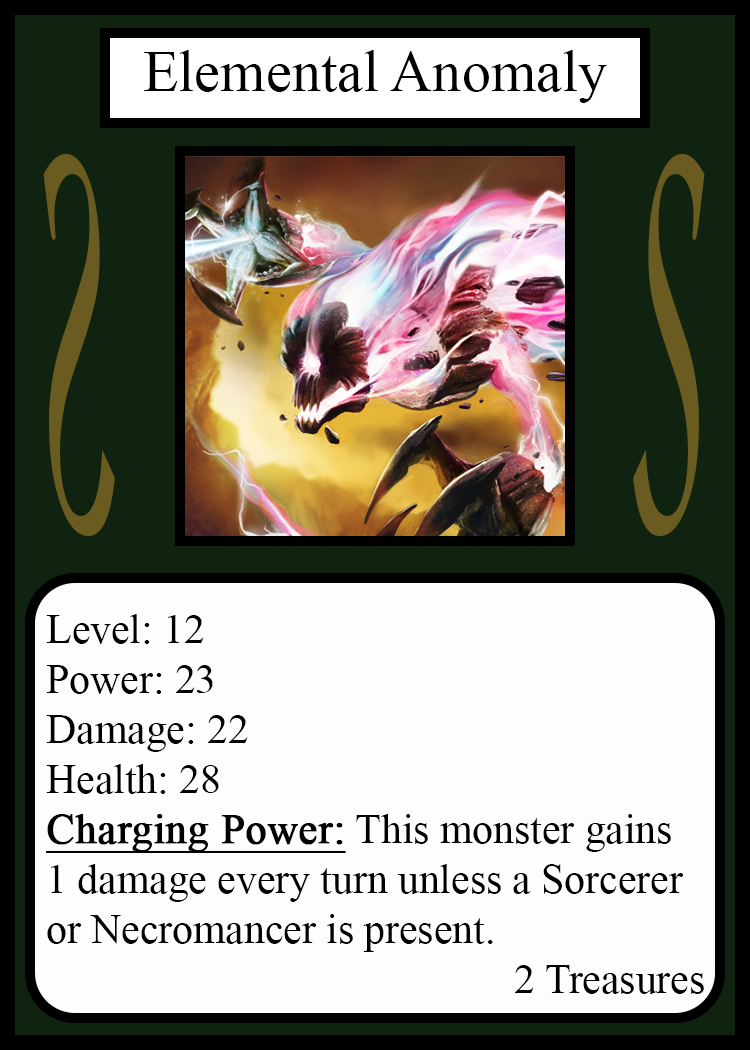
<style>
.page{position:relative;width:750px;height:1050px;background:#fffcfc}
.page>*{position:absolute;margin:0}
.t1{font:58.3px "TimesNewRomanPSMT";color:#010101}
.t2{font:548.5px "Apple-Chancery";color:#6a5c21;scale:0.27 1}
.t3{font:548.2px "Apple-Chancery";color:#6a5c21;scale:0.27 1}
.t4{font:41.7px "TimesNewRomanPSMT";color:#000000}
.t5{font:41.7px "TimesNewRomanPSMT";color:#000000;font-weight:bold;text-decoration:underline}
</style>
<div class="page">
<p class="t1" style="left:144px;top:50px;width:463px;height:53px">Elemental Anomaly</p>
<p class="t2" style="left:43px;top:154px;width:72px;height:382px;rotate:180deg">S</p>
<p class="t3" style="left:633px;top:154px;width:72px;height:382px">S</p>
<p class="t4" style="left:46px;top:614px;width:658px;height:380px">Level: 12<br>Power: 23<br>Damage: 22<br>Health: 28<br><span class="t5">Charging Power:</span> This monster gains<br>1 damage every turn unless a Sorcerer<br>or Necromancer is present.<br>             2 Treasures</p>
</div>
